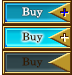
<style>
.page{position:relative;width:72px;height:75px}
.page>*{position:absolute;margin:0}
.t1{font:10.7px "CenturySchoolbook";letter-spacing:0.025em;color:#ffffff}
.t2{font:10.7px "CenturySchoolbook";letter-spacing:0.025em;color:#321a02}
</style>
<div class="page">
<p class="t1" style="left:22px;top:7px;width:21px;height:11px">Buy</p>
<p class="t2" style="left:22px;top:32px;width:21px;height:11px">Buy</p>
<p class="t2" style="left:22px;top:57px;width:21px;height:11px">Buy</p>
</div>
